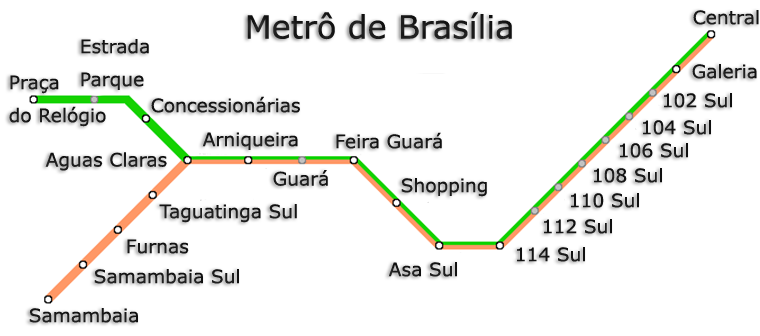
<style>
.page{position:relative;width:760px;height:336px;background:#ffffff}
.page>*{position:absolute;margin:0}
.t1{font:32px "Verdana";color:#1b1b1b}
.t2{font:18.7px "Verdana";color:#1b1b1b}
.t3{font:18.7px/33px "Verdana";color:#1b1b1b}
.t4{font:18.7px "Verdana";color:#1c1c1c}
.t5{font:18.7px/33px "Verdana";color:#1c1c1c}
.t6{font:18.7px "Verdana";color:#181818}
.t7{font:18.7px "Verdana";color:#1a1a1a}
.t8{font:18.7px "Verdana";color:#191919}
.t9{font:18.7px "Verdana";color:#141414}
.t10{font:18.7px "Verdana";color:#131313}
</style>
<div class="page">
<p class="t1" style="left:247px;top:12px;width:265px;height:28px">Metrô de Brasília</p>
<p class="t2" style="left:693px;top:10px;width:66px;height:15px">Central</p>
<p class="t3" style="left:81px;top:39px;width:68px;height:51px">Estrada<br>Parque</p>
<p class="t4" style="left:692px;top:64px;width:65px;height:15px">Galeria</p>
<p class="t5" style="left:9px;top:75px;width:97px;height:52px">Praça <br>do Relógio</p>
<p class="t4" style="left:151px;top:96px;width:149px;height:17px">Concessionárias</p>
<p class="t6" style="left:664px;top:93px;width:68px;height:15px">102 Sul</p>
<p class="t6" style="left:643px;top:120px;width:68px;height:15px">104 Sul</p>
<p class="t4" style="left:202px;top:132px;width:96px;height:18px">Arniqueira</p>
<p class="t7" style="left:336px;top:132px;width:106px;height:17px">Feira Guará</p>
<p class="t8" style="left:620px;top:143px;width:68px;height:15px">106 Sul</p>
<p class="t2" style="left:45px;top:152px;width:122px;height:19px">Aguas Claras</p>
<p class="t7" style="left:273px;top:170px;width:55px;height:16px">Guará</p>
<p class="t8" style="left:594px;top:168px;width:68px;height:15px">108 Sul</p>
<p class="t4" style="left:401px;top:178px;width:86px;height:19px">Shopping</p>
<p class="t9" style="left:571px;top:193px;width:68px;height:15px">110 Sul</p>
<p class="t4" style="left:159px;top:204px;width:138px;height:19px">Taguatinga Sul</p>
<p class="t10" style="left:544px;top:219px;width:68px;height:15px">112 Sul</p>
<p class="t8" style="left:127px;top:239px;width:62px;height:15px">Furnas</p>
<p class="t10" style="left:517px;top:247px;width:68px;height:15px">114 Sul</p>
<p class="t2" style="left:94px;top:269px;width:145px;height:15px">Samambaia Sul</p>
<p class="t8" style="left:388px;top:262px;width:69px;height:15px">Asa Sul</p>
<p class="t4" style="left:29px;top:308px;width:109px;height:15px">Samambaia</p>
</div>
